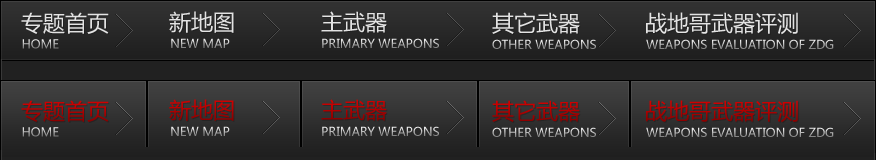
<style>
.page{position:relative;width:876px;height:160px}
.page>*{position:absolute;margin:0}
.t1{font:22px "MicrosoftYaHei";color:#e3e3e3}
.t2{font:12px "MicrosoftYaHei"}
.t3{font:22px "MicrosoftYaHei"}
</style>
<div class="page">
<p class="t1" style="left:21px;top:12px;width:88px;height:22px">专题首页</p>
<p class="t1" style="left:169px;top:11px;width:65px;height:22px">新地图</p>
<p class="t1" style="left:321px;top:11px;width:66px;height:22px">主武器</p>
<p class="t1" style="left:492px;top:12px;width:88px;height:22px">其它武器</p>
<p class="t1" style="left:646px;top:12px;width:152px;height:23px">战地哥武器评测</p>
<p class="t2" style="left:22px;top:39px;width:37px;height:10px">HOME</p>
<p class="t2" style="left:171px;top:38px;width:59px;height:10px">NEW MAP</p>
<p class="t2" style="left:322px;top:38px;width:117px;height:10px">PRIMARY WEAPONS</p>
<p class="t2" style="left:492px;top:39px;width:104px;height:10px">OTHER WEAPONS</p>
<p class="t2" style="left:646px;top:39px;width:188px;height:10px">WEAPONS EVALUATION OF ZDG</p>
<p class="t3" style="left:21px;top:100px;width:88px;height:22px">专题首页</p>
<p class="t3" style="left:169px;top:99px;width:65px;height:22px">新地图</p>
<p class="t3" style="left:321px;top:99px;width:66px;height:22px">主武器</p>
<p class="t3" style="left:492px;top:100px;width:88px;height:22px">其它武器</p>
<p class="t3" style="left:646px;top:100px;width:152px;height:23px">战地哥武器评测</p>
<p class="t2" style="left:171px;top:126px;width:59px;height:10px">NEW MAP</p>
<p class="t2" style="left:322px;top:126px;width:117px;height:10px">PRIMARY WEAPONS</p>
<p class="t2" style="left:22px;top:127px;width:37px;height:10px">HOME</p>
<p class="t2" style="left:492px;top:127px;width:104px;height:10px">OTHER WEAPONS</p>
<p class="t2" style="left:646px;top:127px;width:188px;height:10px">WEAPONS EVALUATION OF ZDG</p>
</div>
